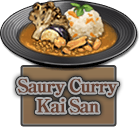
<style>
.page{position:relative;width:139px;height:127px;background:#ffffff}
.page>*{position:absolute;margin:0}
.t1{font:18px/20px "RyuminPro-ExBold";letter-spacing:-0.08em;color:#654031;font-weight:bold}
</style>
<div class="page">
<p class="t1" style="left:18px;top:78px;width:100px;height:35px;text-align:center">Saury Curry<br>Kai San</p>
</div>
